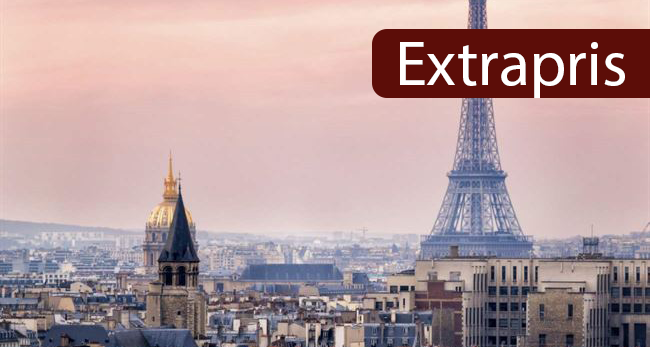
<style>
.page{position:relative;width:650px;height:347px}
.page>*{position:absolute;margin:0}
.t1{font:64px "MyriadPro-Regular";color:#ffffff}
</style>
<div class="page">
<p class="t1" style="left:400px;top:42px;width:225px;height:56px">Extrapris</p>
</div>
